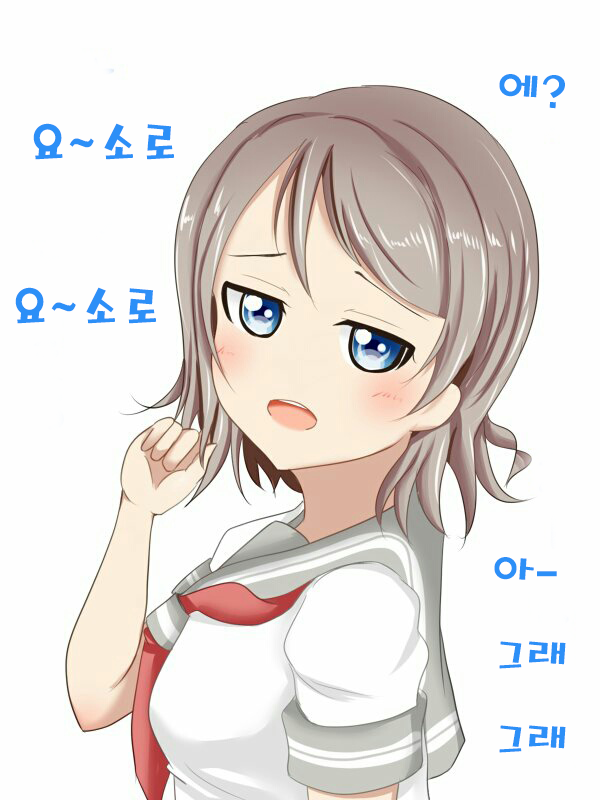
<style>
.page{position:relative;width:600px;height:800px;background:#fefefe}
.page>*{position:absolute;margin:0}
.t1{font:48px "MagicR-HM";color:#2c8ff7}
.t2{font:60px "MagicR-HM";color:#2c8ff7}
</style>
<div class="page">
<p class="t1" style="left:499px;top:74px;width:66px;height:35px">에?</p>
<p class="t2" style="left:33px;top:123px;width:142px;height:37px">요~소로</p>
<p class="t2" style="left:15px;top:287px;width:142px;height:37px">요~소로</p>
<p class="t1" style="left:494px;top:557px;width:72px;height:196px">아-<br>그래<br>그래</p>
</div>
